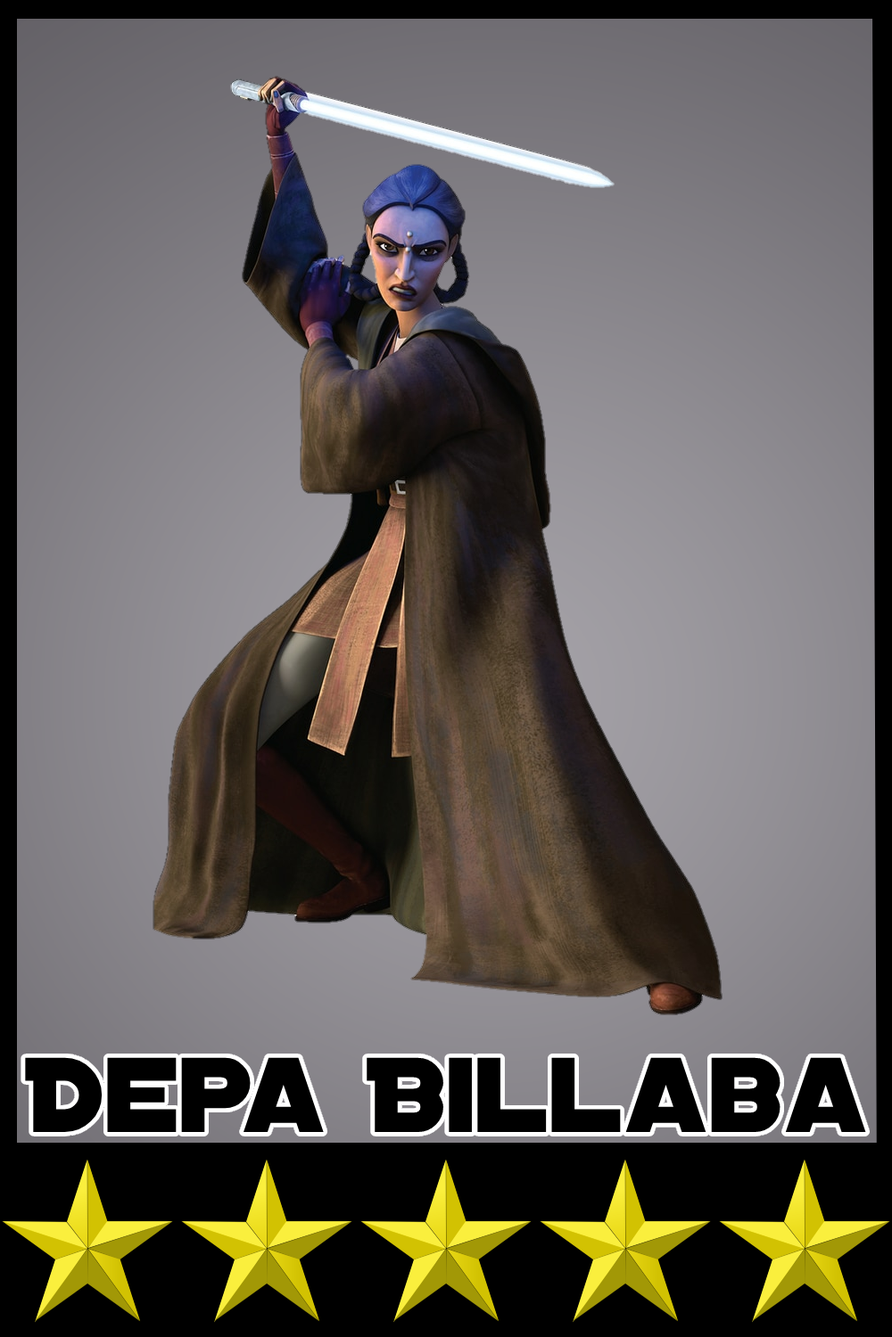
<style>
.page{position:relative;width:892px;height:1337px}
.page>*{position:absolute;margin:0}
.t1{font:114.1px "DistantGalaxy";color:#000000}
</style>
<div class="page">
<p class="t1" style="left:25px;top:1057px;width:841px;height:75px">Depa Billaba</p>
</div>
